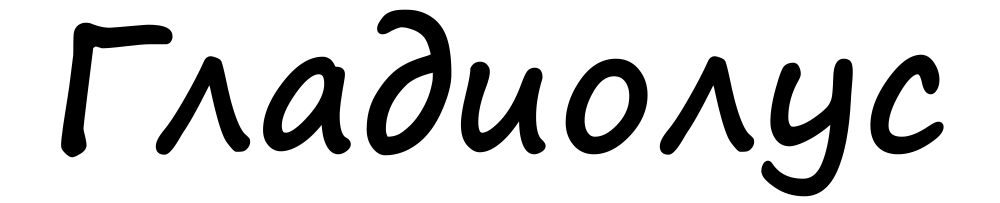
<style>
.page{position:relative;width:1000px;height:203px;background:#ffffff}
.page>*{position:absolute;margin:0}
.t1{font:166.7px "SegoePrint";color:#000000;font-weight:bold}
</style>
<div class="page">
<p class="t1" style="left:61px;top:9px;width:883px;height:188px">Гладиолус</p>
</div>
